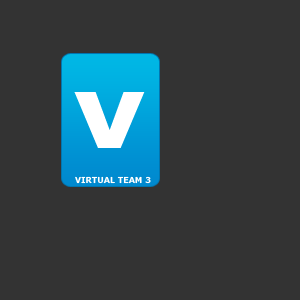
<style>
.page{position:relative;width:300px;height:300px;background:#333333}
.page>*{position:absolute;margin:0}
.t1{font:102.8px "Verdana-Bold";color:#ffffff;scale:1.09 1}
.t2{font:8px "Verdana-Bold";color:#ffffff}
</style>
<div class="page">
<p class="t1" style="left:74px;top:92px;width:71px;height:56px">v</p>
<p class="t2" style="left:75px;top:176px;width:76px;height:8px">VIRTUAL TEAM 3</p>
</div>
